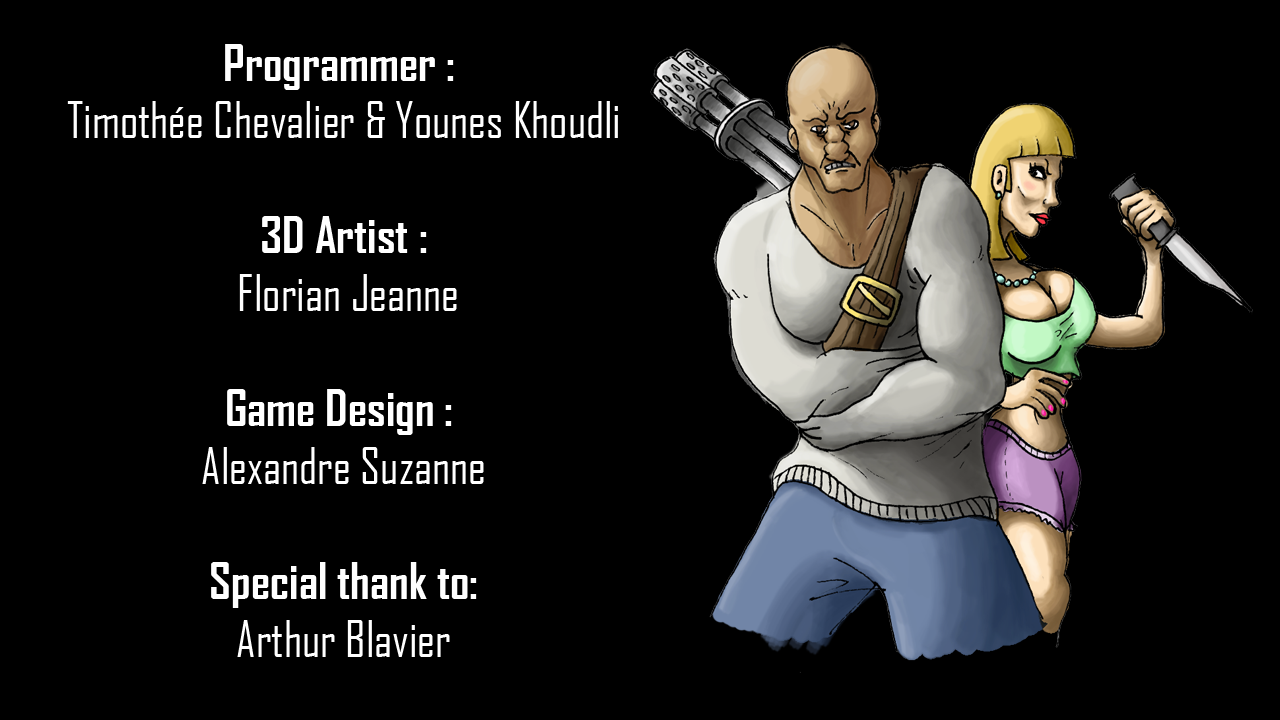
<style>
.page{position:relative;width:1280px;height:720px;background:#000000}
.page>*{position:absolute;margin:0}
.t1{font:48px "AgencyFB-Reg";color:#ffffff}
.t2{font:48px "AgencyFB-Bold";color:#ffffff}
</style>
<div class="page">
<p class="t1" style="left:67px;top:44px;width:551px;height:613px;text-align:center"><span class="t2">Programmer : <br></span>Timothée Chevalier &amp; Younes Khoudli<br><br><span class="t2">3D Artist :<br></span> Florian Jeanne<br><br><span class="t2">Game Design : <br></span>Alexandre Suzanne<br><br><span class="t2">Special thank to:<br></span>Arthur Blavier</p>
</div>
